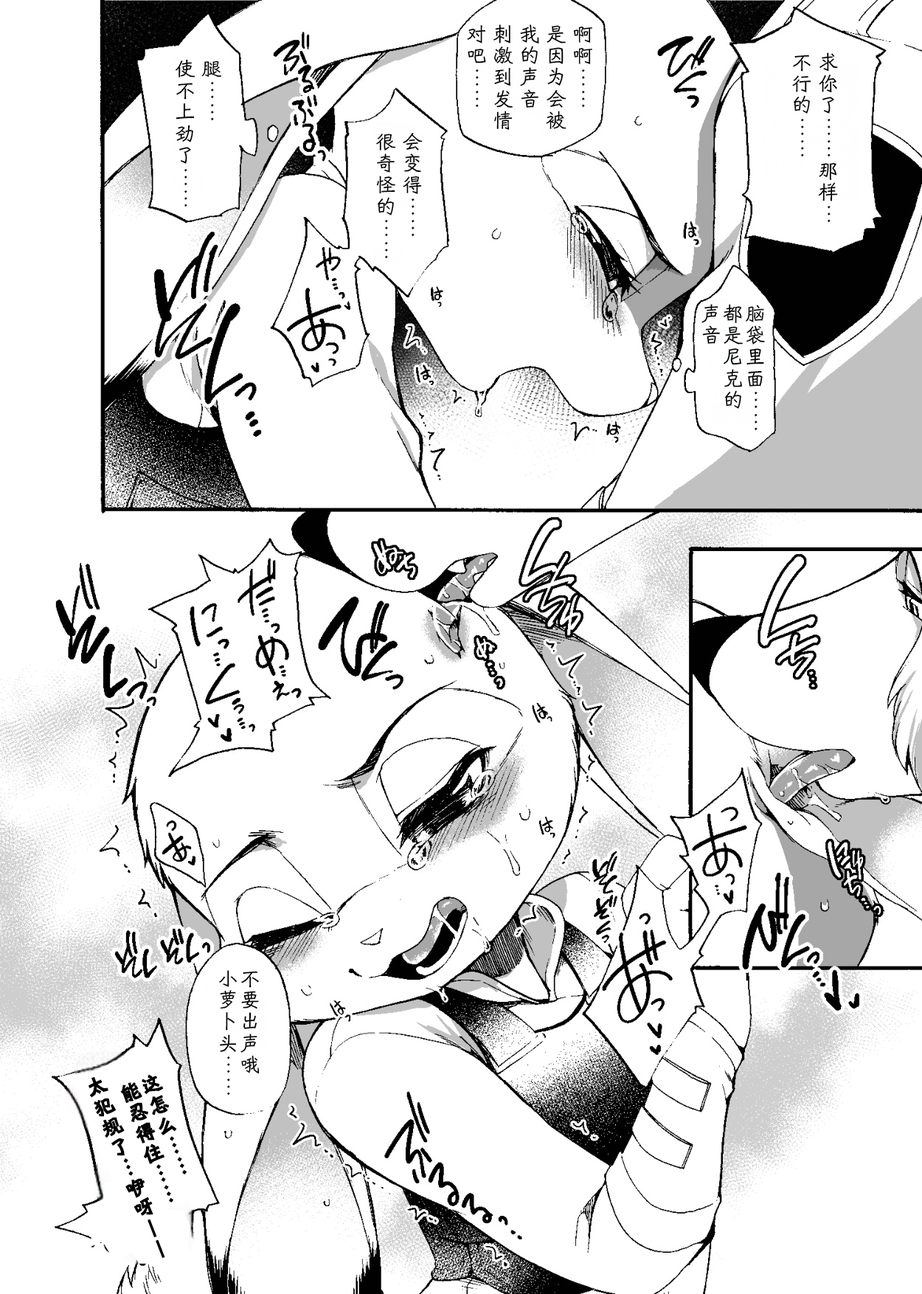
<style>
.page{position:relative;width:922px;height:1294px;background:#ffffff}
.page>*{position:absolute;margin:0}
.t1{font:20.6px/26.5px "HYShiWei55U";letter-spacing:0.05em;color:#000000}
.t2{font:20.6px/22.1px "HYShiWei55U";letter-spacing:0.05em;color:#000000}
.t3{font:20.6px/22.1px "HYShiWei75U";letter-spacing:0.05em;color:#000000;font-weight:bold}
.t4{font:20.6px "HYShiWei75U";letter-spacing:0.05em;color:#000000;font-weight:bold}
</style>
<div class="page">
<p class="t1" style="left:467px;top:24px;width:125px;height:106px">啊啊……<br>是因为会被<br>我的声音<br>刺激到发情<br>对吧……</p>
<p class="t1" style="left:792px;top:52px;width:46px;height:171px">求你了……那样…<br>不行的……</p>
<p class="t1" style="left:175px;top:59px;width:47px;height:148px">腿……<br>使不上劲了……</p>
<p class="t1" style="left:376px;top:132px;width:47px;height:127px">会变得……<br>很奇怪的……</p>
<p class="t2" style="left:701px;top:304px;width:64px;height:127px">脑袋里面……<br>都是尼克的<br>声音</p>
<p class="t2" style="left:219px;top:970px;width:41px;height:125px">不要出声哦<br>小萝卜头……</p>
<p class="t3" style="left:120px;top:1074px;width:67px;height:128px;rotate:-20deg">这怎么……<br>能忍得住……</p>
<p class="t4" style="left:88px;top:1077px;width:77px;height:180px;rotate:-21deg">太犯规了…咿呀——</p>
</div>
